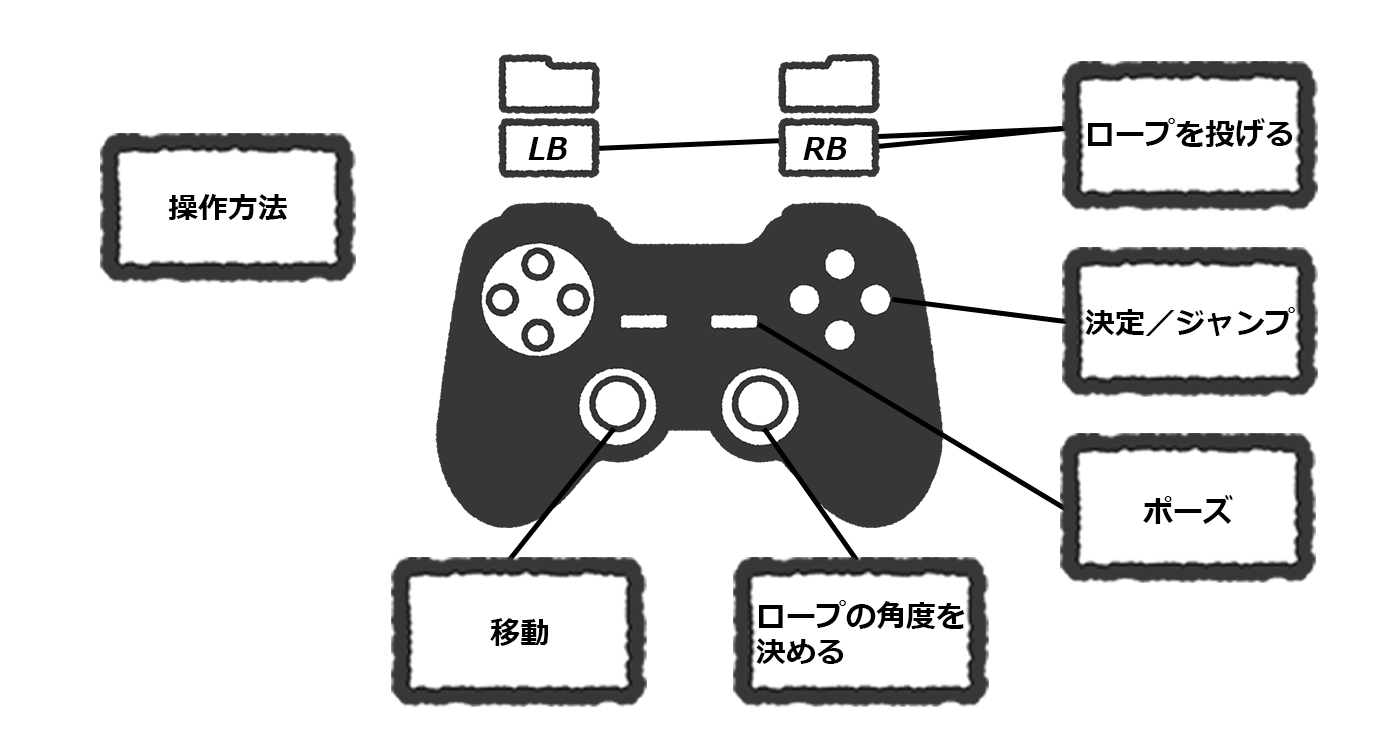
<style>
.page{position:relative;width:1379px;height:738px;background:#ffffff}
.page>*{position:absolute;margin:0}
.t1{font:30px "Meiryo-BoldItalic";color:#000000}
.t2{font:30px/36px "Meiryo-BoldItalic";color:#000000}
</style>
<div class="page">
<p class="t1" style="left:1088px;top:118px;width:205px;height:29px">ロープを投げる</p>
<p class="t1" style="left:528px;top:137px;width:39px;height:23px">LB</p>
<p class="t1" style="left:803px;top:137px;width:44px;height:23px">RB</p>
<p class="t1" style="left:168px;top:194px;width:119px;height:26px">操作方法</p>
<p class="t1" style="left:1085px;top:307px;width:210px;height:29px">決定／ジャンプ</p>
<p class="t1" style="left:1143px;top:495px;width:90px;height:29px">ポーズ</p>
<p class="t2" style="left:756px;top:600px;width:209px;height:64px">ロープの角度を<br>決める</p>
<p class="t1" style="left:490px;top:618px;width:58px;height:28px">移動</p>
</div>
